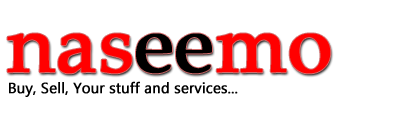
<style>
.page{position:relative;width:400px;height:120px;background:#ffffff}
.page>*{position:absolute;margin:0}
.t1{font:80px "PalatinoLinotype-Roman";color:#ff0000;font-weight:bold}
.t2{font:80px "PalatinoLinotype-Roman";color:#000000;font-weight:bold}
.t3{font:14.7px "LaoUI";color:#000000;font-weight:bold}
</style>
<div class="page">
<p class="t1" style="left:7px;top:33px;width:324px;height:41px">nas<span class="t2">ee</span>mo</p>
<p class="t3" style="left:9px;top:81px;width:229px;height:16px">Buy, Sell, Your stuff and services...</p>
</div>
